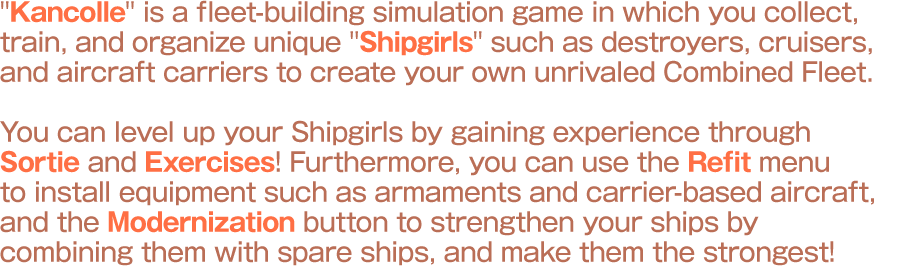
<style>
.page{position:relative;width:913px;height:268px;background:#ffffff}
.page>*{position:absolute;margin:0}
.t1{font:26px/30px "GothicMB101Pro-Medium";letter-spacing:-0.02em;color:#ba6e56;scale:0.95 1}
.t2{font:26px/30px "GothicMB101Pro-Bold";letter-spacing:-0.02em;color:#ff6f44;scale:0.95 1}
</style>
<div class="page">
<p class="t1" style="left:0px;top:0px;width:874px;height:266px">"<span class="t2">Kancolle</span>" is a fleet-building simulation game in which you collect,<br>train, and organize unique "<span class="t2">Shipgirls</span>" such as destroyers, cruisers,<br>and aircraft carriers to create your own unrivaled Combined Fleet.<br><br>You can level up your Shipgirls by gaining experience through<br><span class="t2">Sortie</span> and <span class="t2">Exercises</span>! Furthermore, you can use the <span class="t2">Refit</span> menu<br>to install equipment such as armaments and carrier-based aircraft,<br>and the <span class="t2">Modernization</span> button to strengthen your ships by<br>combining them with spare ships, and make them the strongest!</p>
</div>
